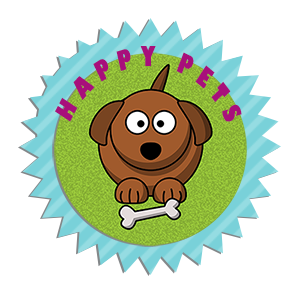
<style>
.page{position:relative;width:300px;height:295px;background:#ffffff}
.page>*{position:absolute;margin:0}
.t1{font:24.6px "GillSans-UltraBold";letter-spacing:0.46em;color:#a80f7b;text-transform:uppercase;scale:0.73 1}
</style>
<div class="page">
<p class="t1" style="left:55px;top:46px;width:187px;height:76px;rotate:59deg">Happy Pets</p>
</div>
